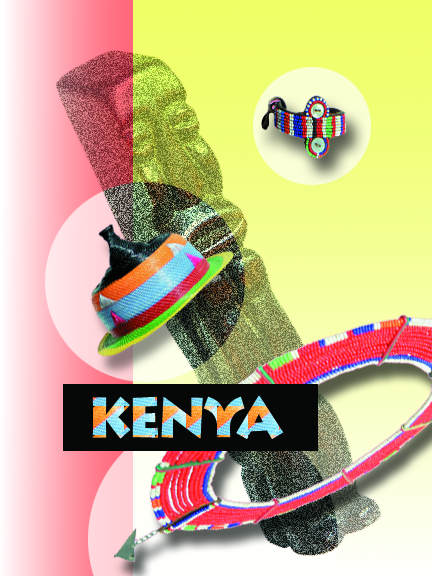
<style>
.page{position:relative;width:432px;height:576px}
.page>*{position:absolute;margin:0}
.t1{font:55px "LithosPro-Black";letter-spacing:-0.1em;font-weight:bold}
</style>
<div class="page">
<p class="t1" style="left:92px;top:395px;width:192px;height:45px">KENYA</p>
</div>
